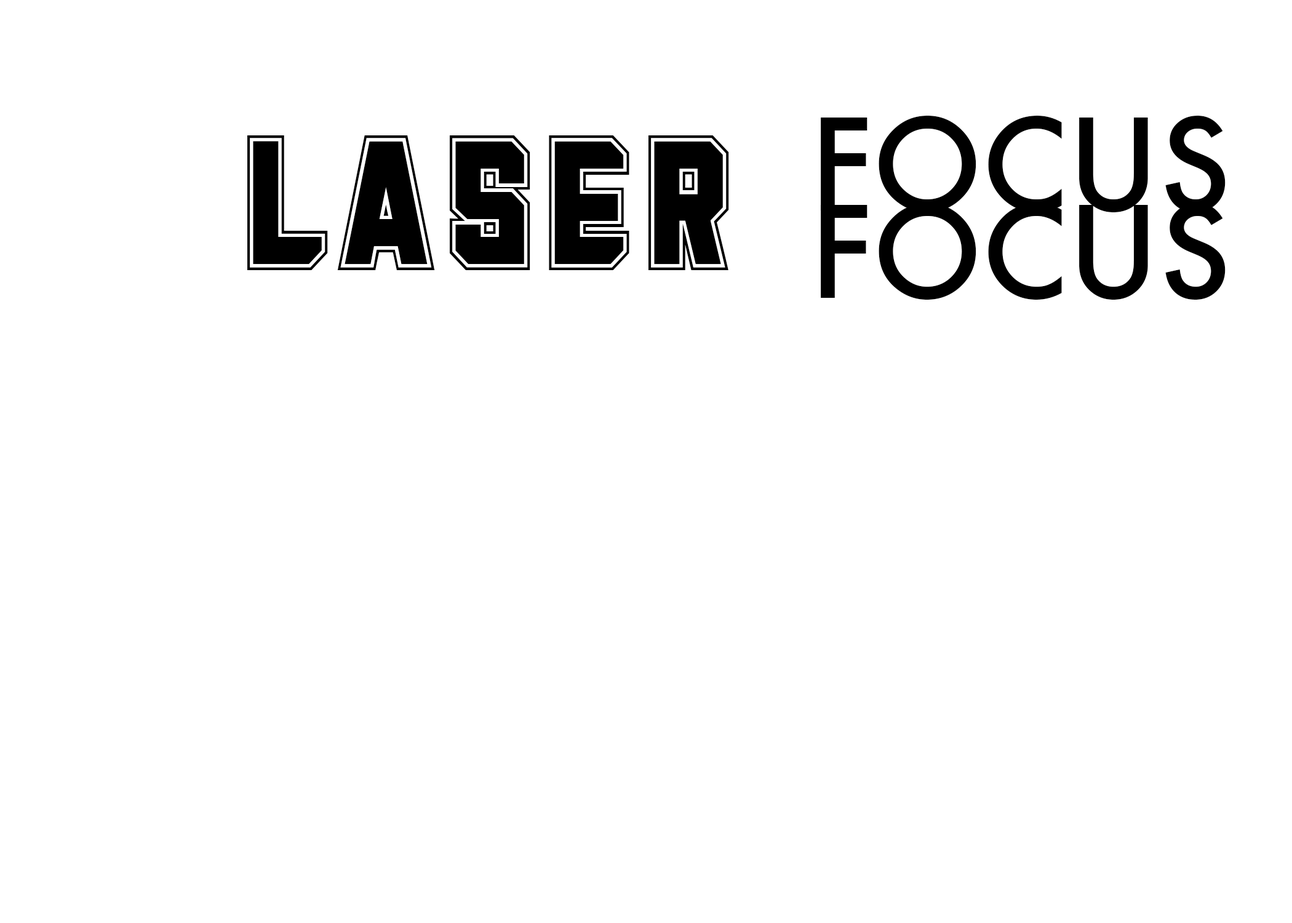
<style>
.page{position:relative;width:1292px;height:923px;background:#ffffff}
.page>*{position:absolute;margin:0}
.t1{font:123.1px "Futura-Medium";color:#000000}
.t2{font:192.3px "MamaPunch";color:#000000}
</style>
<div class="page">
<p class="t1" style="left:821px;top:116px;width:405px;height:96px">FOCUS</p>
<p class="t2" style="left:247px;top:135px;width:482px;height:135px">LASER</p>
<p class="t1" style="left:821px;top:203px;width:405px;height:97px">FOCUS</p>
</div>
